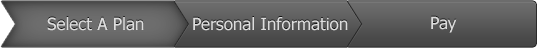
<style>
.page{position:relative;width:537px;height:48px}
.page>*{position:absolute;margin:0}
.t1{font:17px "Tahoma";color:#dddddd}
</style>
<div class="page">
<p class="t1" style="left:47px;top:17px;width:97px;height:14px">Select A Plan</p>
<p class="t1" style="left:193px;top:17px;width:155px;height:14px">Personal Information</p>
<p class="t1" style="left:431px;top:16px;width:26px;height:17px">Pay</p>
</div>
